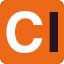
<style>
.page{position:relative;width:64px;height:64px;background:#ec6917}
.page>*{position:absolute;margin:0}
.t1{font:56px "Helvetica-Bold";color:#fefcfd}
.t2{font:56px "Helvetica-Bold";color:#26151b}
</style>
<div class="page">
<p class="t1" style="left:6px;top:11px;width:37px;height:42px">C</p>
<p class="t2" style="left:49px;top:12px;width:9px;height:40px">I</p>
</div>
